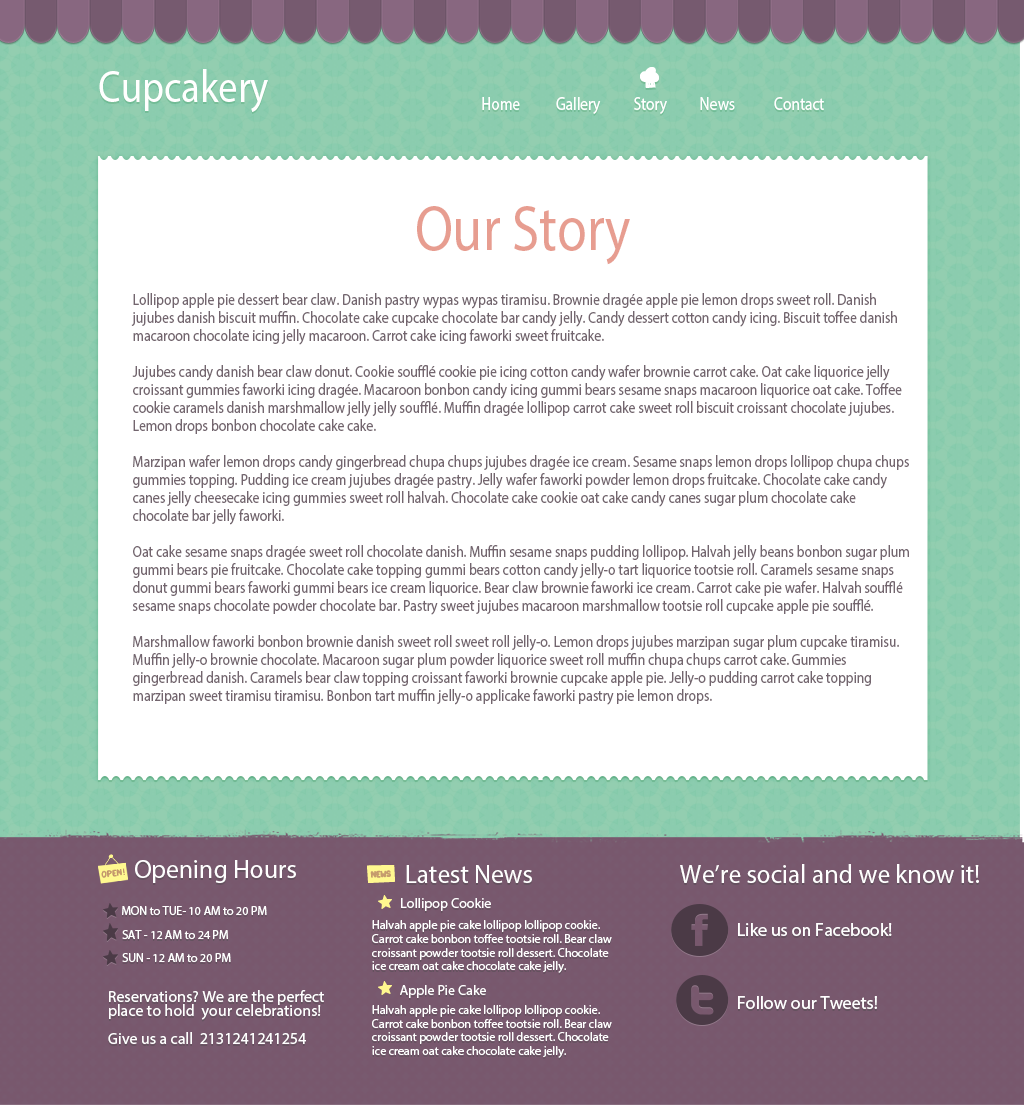
<style>
.page{position:relative;width:1024px;height:1105px;background:#ffffff}
.page>*{position:absolute;margin:0}
.t1{font:45.4px "MyriadPro-Regular";color:#ffffff;scale:0.85 1}
.t2{font:18px "MyriadPro-Regular";color:#ffffff;scale:0.85 1}
.t3{font:64px "MyriadPro-Regular";color:#e79d90;scale:0.85 1}
.t4{font:16px/18px "MyriadPro-Regular";color:#7e7569;scale:0.85 1}
.t5{font:25.6px "MyriadPro-Regular";color:#ffffff}
.t6{font:14px "MyriadPro-Regular";color:#ffffff}
.t7{font:12px "MyriadPro-Regular";color:#ffffff}
.t8{font:12px/13.7px "MyriadPro-Regular";color:#ffffff}
.t9{font:18px "MyriadPro-Regular";color:#ffffff}
.t10{font:16px/14px "MyriadPro-Regular";color:#ffffff}
</style>
<div class="page">
<p class="t1" style="left:99px;top:69px;width:169px;height:43px">Cupcakery</p>
<p class="t2" style="left:482px;top:97px;width:342px;height:17px">Home     Gallery          Story  News      Contact</p>
<p class="t3" style="left:417px;top:206px;width:213px;height:59px">Our Story</p>
<p class="t4" style="left:131px;top:293px;width:778px;height:412px">Lollipop apple pie dessert bear claw. Danish pastry wypas wypas tiramisu. Brownie dragée apple pie lemon drops sweet roll. Danish jujubes danish biscuit muffin. Chocolate cake cupcake chocolate bar candy jelly. Candy dessert cotton candy icing. Biscuit toffee danish macaroon chocolate icing jelly macaroon. Carrot cake icing faworki sweet fruitcake.<br><br>Jujubes candy danish bear claw donut. Cookie soufflé cookie pie icing cotton candy wafer brownie carrot cake. Oat cake liquorice jelly croissant gummies faworki icing dragée. Macaroon bonbon candy icing gummi bears sesame snaps macaroon liquorice oat cake. Toffee cookie caramels danish marshmallow jelly jelly soufflé. Muffin dragée lollipop carrot cake sweet roll biscuit croissant chocolate jujubes. Lemon drops bonbon chocolate cake cake.<br><br>Marzipan wafer lemon drops candy gingerbread chupa chups jujubes dragée ice cream. Sesame snaps lemon drops lollipop chupa chups gummies topping. Pudding ice cream jujubes dragée pastry. Jelly wafer faworki powder lemon drops fruitcake. Chocolate cake candy canes jelly cheesecake icing gummies sweet roll halvah. Chocolate cake cookie oat cake candy canes sugar plum chocolate cake chocolate bar jelly faworki.<br><br>Oat cake sesame snaps dragée sweet roll chocolate danish. Muffin sesame snaps pudding lollipop. Halvah jelly beans bonbon sugar plum gummi bears pie fruitcake. Chocolate cake topping gummi bears cotton candy jelly-o tart liquorice tootsie roll. Caramels sesame snaps donut gummi bears faworki gummi bears ice cream liquorice. Bear claw brownie faworki ice cream. Carrot cake pie wafer. Halvah soufflé sesame snaps chocolate powder chocolate bar. Pastry sweet jujubes macaroon marshmallow tootsie roll cupcake apple pie soufflé.<br><br>Marshmallow faworki bonbon brownie danish sweet roll sweet roll jelly-o. Lemon drops jujubes marzipan sugar plum cupcake tiramisu. Muffin jelly-o brownie chocolate. Macaroon sugar plum powder liquorice sweet roll muffin chupa chups carrot cake. Gummies gingerbread danish. Caramels bear claw topping croissant faworki brownie cupcake apple pie. Jelly-o pudding carrot cake topping marzipan sweet tiramisu tiramisu. Bonbon tart muffin jelly-o applicake faworki pastry pie lemon drops.</p>
<p class="t5" style="left:135px;top:860px;width:161px;height:23px">Opening Hours</p>
<p class="t5" style="left:406px;top:865px;width:126px;height:18px">Latest News</p>
<p class="t5" style="left:680px;top:864px;width:299px;height:19px">We’re social and we know it!</p>
<p class="t6" style="left:401px;top:898px;width:90px;height:13px">Lollipop Cookie</p>
<p class="t7" style="left:122px;top:906px;width:145px;height:9px">MON to TUE- 10 AM to 20 PM</p>
<p class="t8" style="left:372px;top:920px;width:240px;height:53px">Halvah apple pie cake lollipop lollipop cookie. Carrot cake bonbon toffee tootsie roll. Bear claw croissant powder tootsie roll dessert. Chocolate ice cream oat cake chocolate cake jelly.</p>
<p class="t9" style="left:738px;top:923px;width:154px;height:13px">Like us on Facebook!</p>
<p class="t7" style="left:122px;top:930px;width:106px;height:9px">SAT - 12 AM to 24 PM</p>
<p class="t7" style="left:122px;top:953px;width:109px;height:9px">SUN - 12 AM to 20 PM</p>
<p class="t10" style="left:108px;top:990px;width:216px;height:54px">Reservations? We are the perfect <br>place to hold  your celebrations! <br><br>Give us a call  2131241241254</p>
<p class="t6" style="left:400px;top:985px;width:86px;height:13px">Apple Pie Cake</p>
<p class="t9" style="left:738px;top:996px;width:139px;height:13px">Follow our Tweets!</p>
<p class="t8" style="left:372px;top:1005px;width:240px;height:53px">Halvah apple pie cake lollipop lollipop cookie. Carrot cake bonbon toffee tootsie roll. Bear claw croissant powder tootsie roll dessert. Chocolate ice cream oat cake chocolate cake jelly.</p>
</div>
